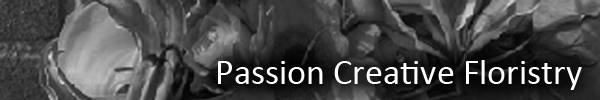
<style>
.page{position:relative;width:600px;height:100px}
.page>*{position:absolute;margin:0}
.t1{font:36px "Calibri";color:#ffffff}
</style>
<div class="page">
<p class="t1" style="left:218px;top:60px;width:364px;height:30px">Passion Creative Floristry</p>
</div>
